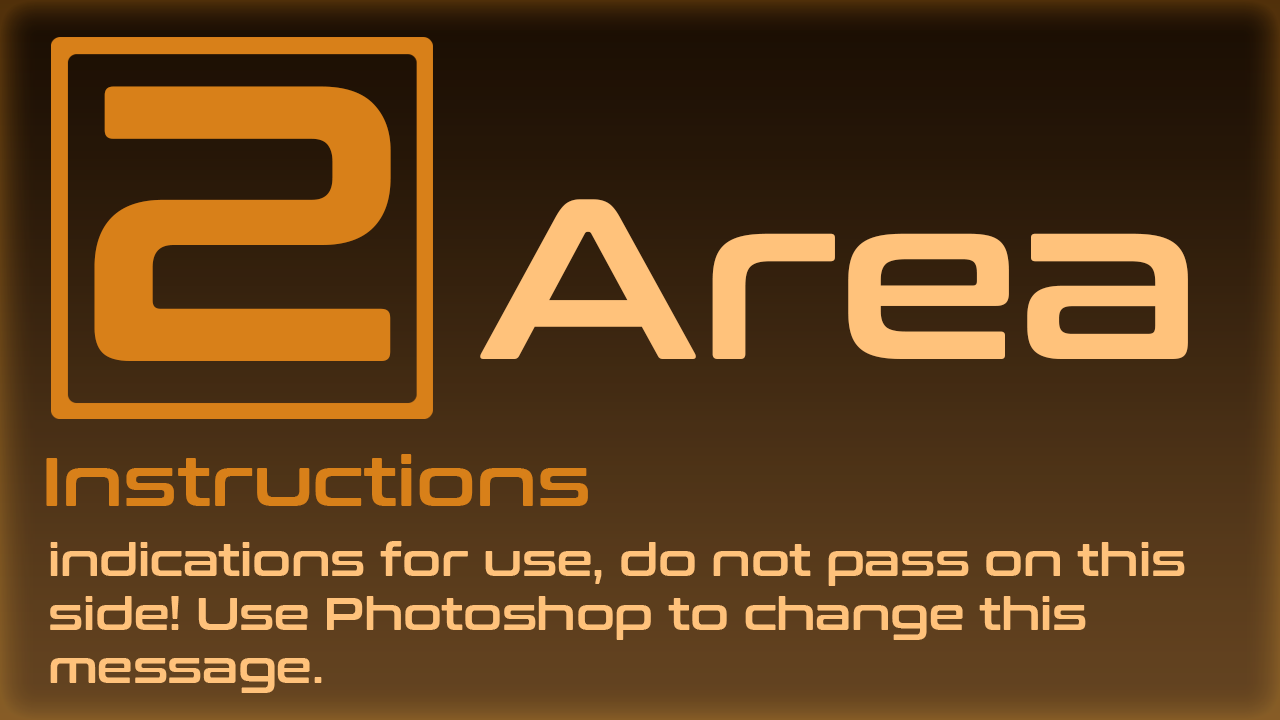
<style>
.page{position:relative;width:1280px;height:720px}
.page>*{position:absolute;margin:0}
.t1{font:391.8px "ConthraxSb-Regular";color:#d88019}
.t2{font:227.7px "ConthraxSb-Regular";color:#ffc27b}
.t3{font:68.9px "ConthraxSb-Regular";color:#d88019}
.t4{font:44.6px "ConthraxSb-Regular";color:#ffc27b}
</style>
<div class="page">
<p class="t1" style="left:94px;top:86px;width:297px;height:275px">2</p>
<p class="t2" style="left:480px;top:199px;width:708px;height:160px">Area</p>
<p class="t3" style="left:46px;top:454px;width:542px;height:52px">Instructions</p>
<p class="t4" style="left:50px;top:541px;width:1135px;height:152px">indications for use, do not pass on this<br>side! Use Photoshop to change this<br>message.</p>
</div>
